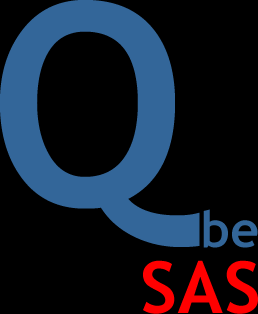
<style>
.page{position:relative;width:258px;height:314px;background:#000000}
.page>*{position:absolute;margin:0}
.t1{font:280px "TrebuchetMS-Bold";letter-spacing:0.01em;color:#336699}
.t2{font:50px "TrebuchetMS-Bold";letter-spacing:0.01em;color:#336699}
.t3{font:72px "TrebuchetMS-Bold";letter-spacing:0.01em;color:#ff0000}
</style>
<div class="page">
<p class="t1" style="left:0px;top:0px;width:200px;height:247px">Q</p>
<p class="t2" style="left:203px;top:209px;width:55px;height:39px">be</p>
<p class="t3" style="left:143px;top:260px;width:115px;height:54px">SAS</p>
</div>
